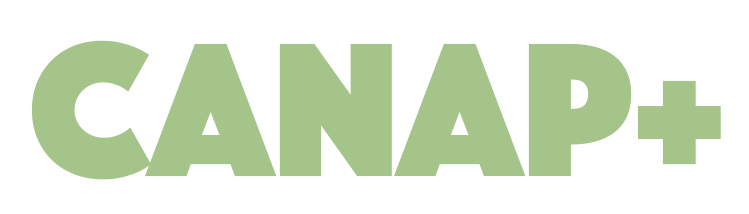
<style>
.page{position:relative;width:749px;height:214px;background:#ffffff}
.page>*{position:absolute;margin:0}
.t1{font:197.7px "Phosphate-Solid";color:#a5c48a}
</style>
<div class="page">
<p class="t1" style="left:31px;top:40px;width:690px;height:140px">Canap+</p>
</div>
